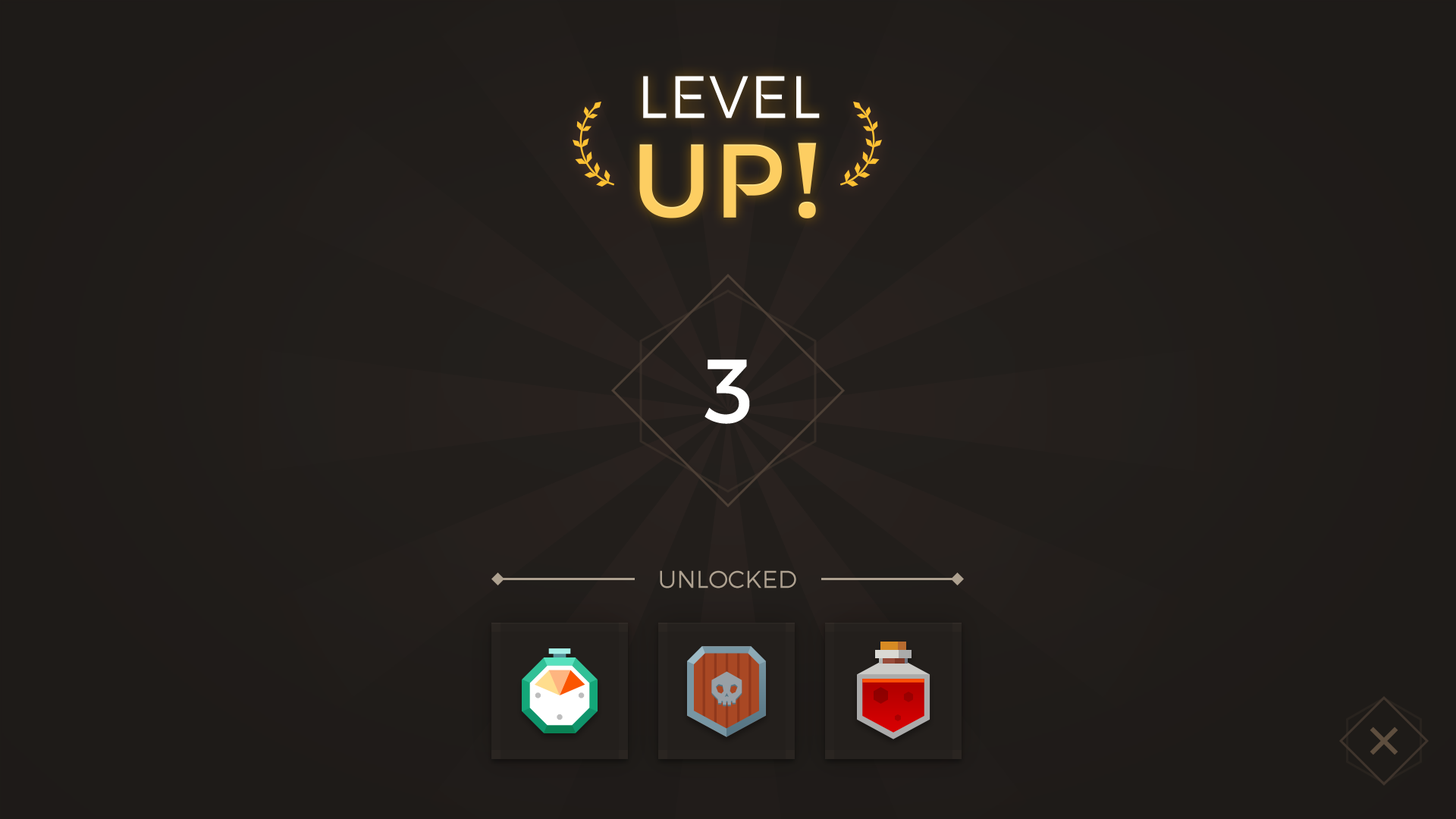
<style>
.page{position:relative;width:1456px;height:819px}
.page>*{position:absolute;margin:0}
.t1{font:91px "Montserrat-Regular";color:#ffffff}
.t2{font:24.3px "Montserrat-Light";color:#aea190;text-transform:uppercase}
</style>
<div class="page">
<p class="t1" style="left:704px;top:359px;width:46px;height:65px">3</p>
<p class="t2" style="left:660px;top:570px;width:136px;height:18px">UNLOCKED</p>
</div>
